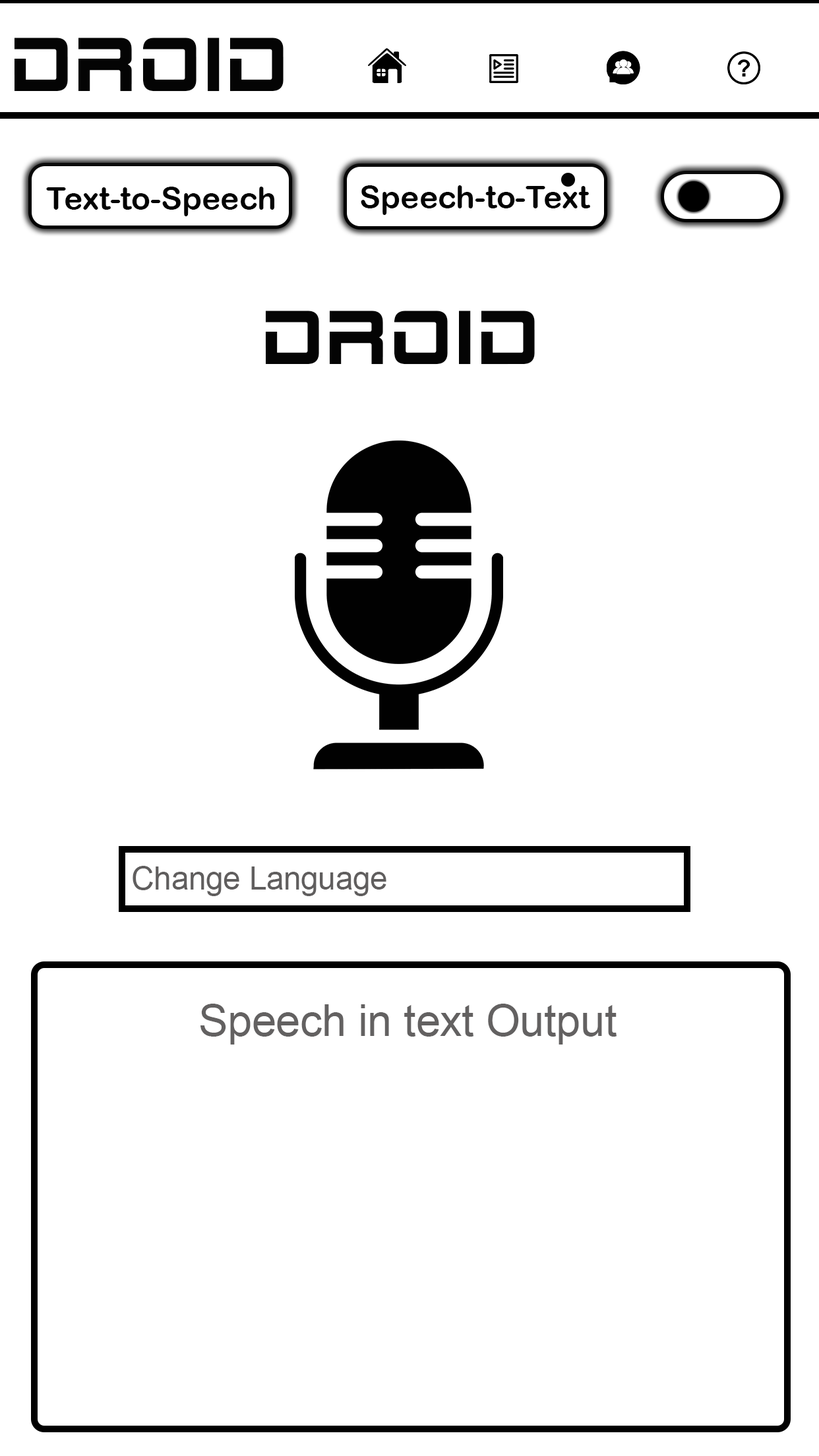
<style>
.page{position:relative;width:819px;height:1456px;background:#ffffff}
.page>*{position:absolute;margin:0}
.t1{font:78px "2015Cruiser";letter-spacing:-0.005em;color:#040404}
.t2{font:31.8px "ArialRoundedMTBold";letter-spacing:-0.005em;color:#030303}
.t3{font:31.4px "ArialMT";letter-spacing:-0.005em;color:#605e5e}
.t4{font:44px "ArialMT";letter-spacing:-0.005em;color:#636161}
</style>
<div class="page">
<p class="t1" style="left:14px;top:38px;width:270px;height:54px">Droid</p>
<p class="t2" style="left:361px;top:185px;width:229px;height:30px">Speech-to-Text</p>
<p class="t2" style="left:46px;top:187px;width:228px;height:29px">Text-to-Speech</p>
<p class="t1" style="left:265px;top:311px;width:270px;height:54px">Droid</p>
<p class="t3" style="left:133px;top:866px;width:253px;height:30px">Change Language</p>
<p class="t4" style="left:200px;top:1004px;width:417px;height:41px">Speech in text Output</p>
</div>
